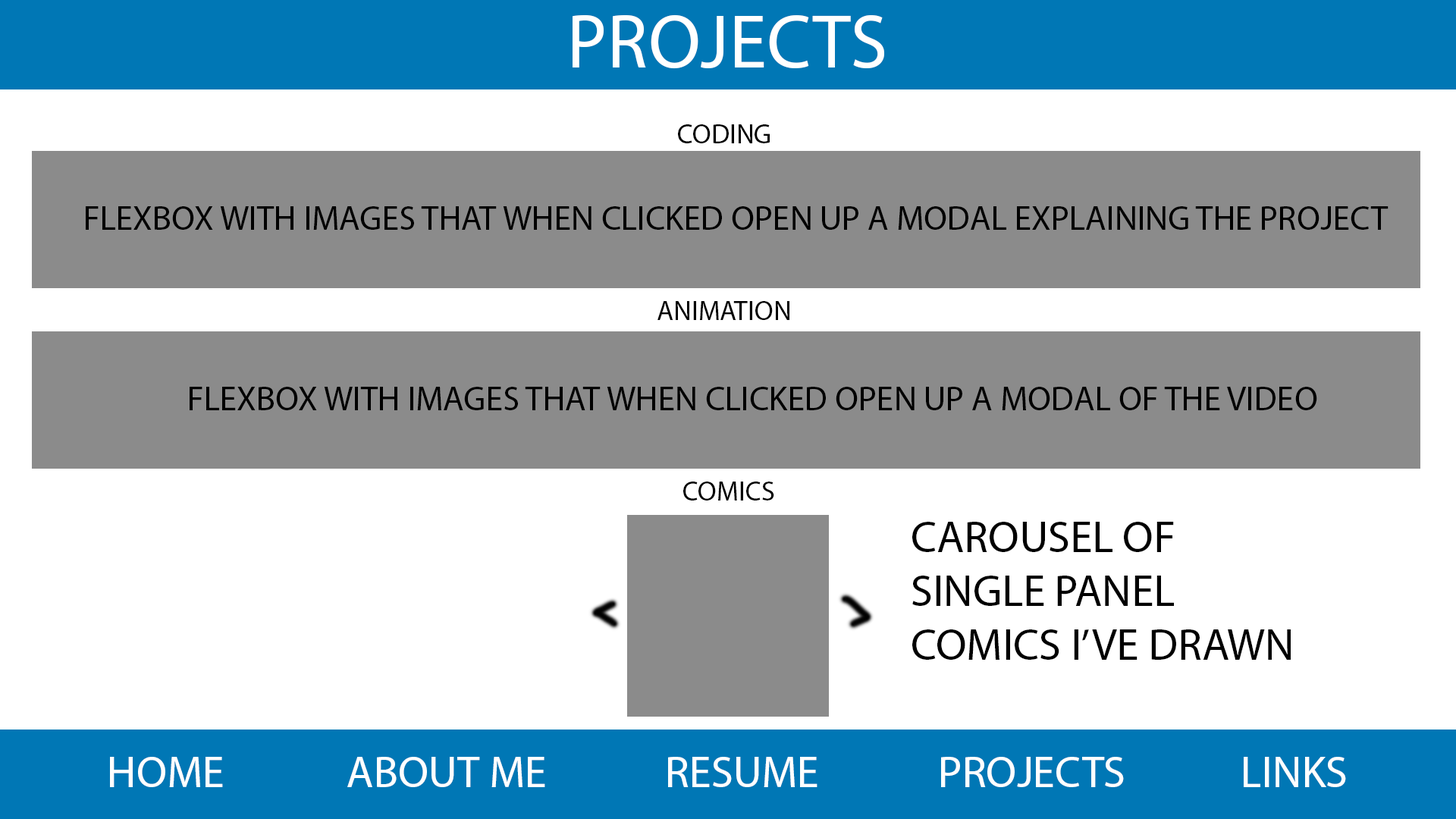
<style>
.page{position:relative;width:1456px;height:819px;background:#ffffff}
.page>*{position:absolute;margin:0}
.t1{font:76.2px "MyriadPro-Regular";color:#ffffff}
.t2{font:27.3px "MyriadPro-Regular";color:#000000}
.t3{font:34.4px "MyriadPro-Regular";color:#000000}
.t4{font:44.7px "MyriadPro-Regular";color:#000000}
.t5{font:44.4px "MyriadPro-Regular";color:#ffffff}
</style>
<div class="page">
<p class="t1" style="left:573px;top:14px;width:311px;height:55px">PROJECTS</p>
<p class="t2" style="left:678px;top:124px;width:92px;height:19px">CODING</p>
<p class="t3" style="left:86px;top:206px;width:1302px;height:24px">FLEXBOX WITH IMAGES THAT WHEN CLICKED OPEN UP A MODAL EXPLAINING THE PROJECT</p>
<p class="t2" style="left:657px;top:301px;width:132px;height:19px">ANIMATION</p>
<p class="t3" style="left:190px;top:387px;width:1127px;height:23px">FLEXBOX WITH IMAGES THAT WHEN CLICKED OPEN UP A MODAL OF THE VIDEO</p>
<p class="t2" style="left:683px;top:482px;width:91px;height:18px">COMICS</p>
<p class="t4" style="left:912px;top:522px;width:379px;height:138px">CAROUSEL OF <br>SINGLE PANEL <br>COMICS I’VE DRAWN</p>
<p class="t5" style="left:110px;top:757px;width:113px;height:30px">HOME</p>
<p class="t5" style="left:347px;top:757px;width:198px;height:30px">ABOUT ME</p>
<p class="t5" style="left:668px;top:757px;width:149px;height:30px">RESUME</p>
<p class="t5" style="left:941px;top:757px;width:183px;height:30px">PROJECTS</p>
<p class="t5" style="left:1244px;top:757px;width:102px;height:30px">LINKS</p>
</div>
